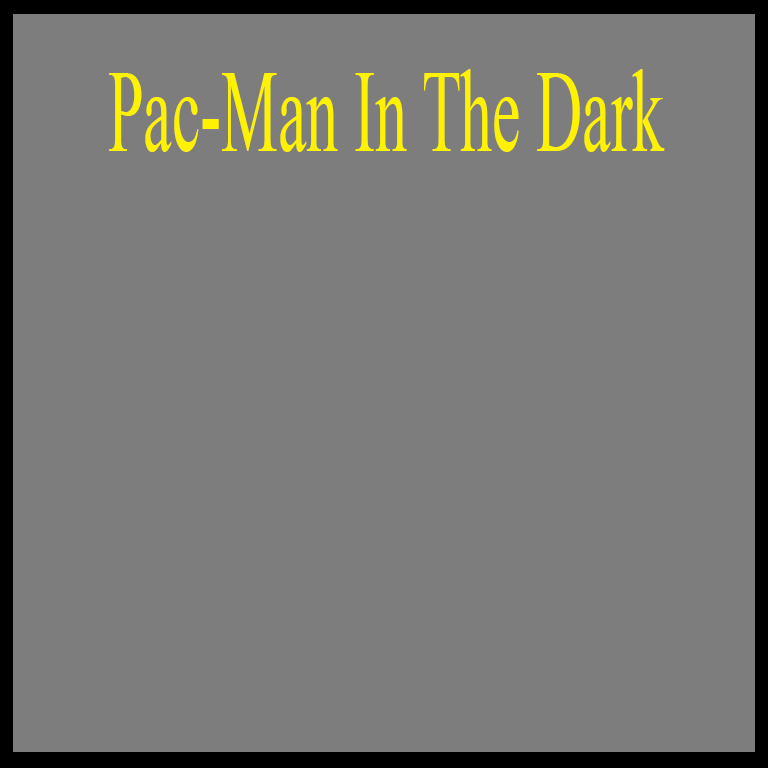
<style>
.page{position:relative;width:768px;height:768px;background:#7d7d7d}
.page>*{position:absolute;margin:0}
.t1{font:118px "TimesNewRomanPSMT";color:#fff200;scale:0.54 1}
</style>
<div class="page">
<p class="t1" style="left:109px;top:69px;width:556px;height:83px">Pac-Man In The Dark</p>
</div>
